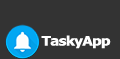
<style>
.page{position:relative;width:120px;height:59px;background:#333333}
.page>*{position:absolute;margin:0}
.t1{font:13.1px "Tahoma-Bold";letter-spacing:-0.04em;color:#ffffff;scale:1.15 1}
</style>
<div class="page">
<p class="t1" style="left:41px;top:35px;width:70px;height:14px">TaskyApp</p>
</div>
